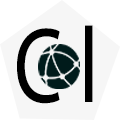
<style>
.page{position:relative;width:120px;height:120px;background:#f6f6f6}
.page>*{position:absolute;margin:0}
.t1{font:107.4px "MyriadConceptRoman-Regular";color:#000000;scale:0.77 1}
</style>
<div class="page">
<p class="t1" style="left:17px;top:25px;width:76px;height:79px">C l</p>
</div>
